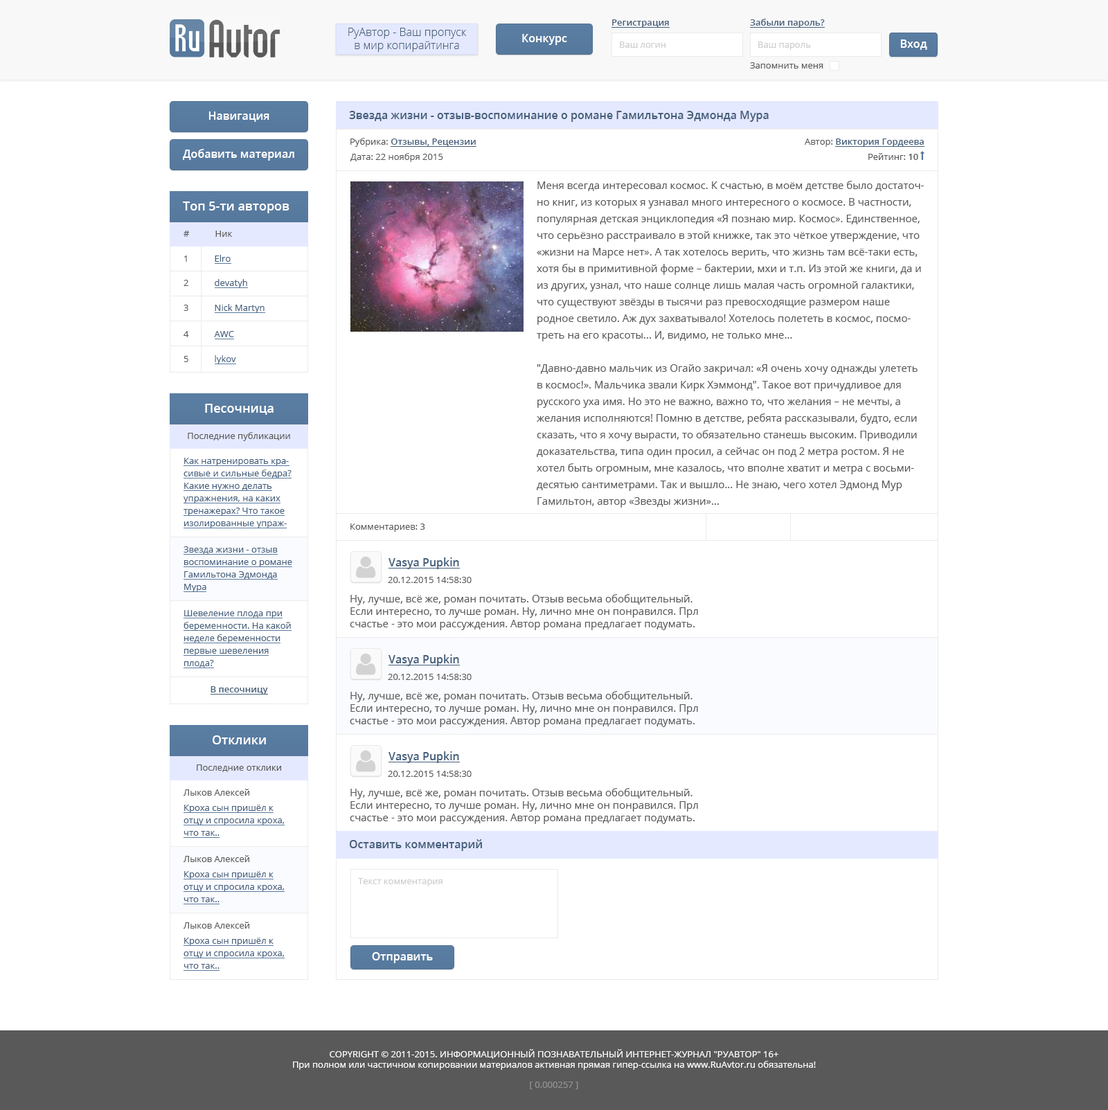
<style>
.page{position:relative;width:1108px;height:1110px;background:#ffffff}
.page>*{position:absolute;margin:0}
.t1{font:11.1px "OpenSans-Light";color:#455f7c}
.t2{font:9px "OpenSans-Semibold";color:#455f7c}
.t3{font:11.1px "OpenSans-Semibold";color:#ffffff}
.t4{font:9px "OpenSans";color:#cccccc}
.t5{font:9px "OpenSans";color:#595959}
.t6{font:11.1px "OpenSans-Semibold";color:#455f7c}
.t7{font:9px "OpenSans-Semibold";color:#595959}
.t8{font:10.4px/16.6px "OpenSans";color:#595959}
.t9{font:12.5px "OpenSans-Semibold";color:#ffffff}
.t10{font:9px "OpenSans";color:#455f7c}
.t11{font:9px/12.5px "OpenSans";color:#455f7c}
.t12{font:10.4px "OpenSans";color:#595959}
.t13{font:9px "OpenSans";color:#ffffff}
.t14{font:9px "OpenSans";color:#929292}
</style>
<div class="page">
<p class="t1" style="left:348px;top:28px;width:119px;height:24px;text-align:center">РуАвтор - Ваш пропуск<br>в мир копирайтинга</p>
<p class="t2" style="left:612px;top:19px;width:57px;height:9px">Регистрация</p>
<p class="t2" style="left:750px;top:19px;width:75px;height:9px">Забыли пароль?</p>
<p class="t3" style="left:522px;top:34px;width:45px;height:11px">Конкурс</p>
<p class="t4" style="left:620px;top:42px;width:45px;height:6px">Ваш логин</p>
<p class="t4" style="left:758px;top:42px;width:53px;height:8px">Ваш пароль</p>
<p class="t3" style="left:900px;top:39px;width:27px;height:11px">Вход</p>
<p class="t5" style="left:750px;top:62px;width:73px;height:7px">Запомнить меня</p>
<p class="t3" style="left:208px;top:111px;width:61px;height:11px">Навигация</p>
<p class="t6" style="left:349px;top:111px;width:419px;height:11px">Звезда жизни - отзыв-воспоминание о романе Гамильтона Эдмонда Мура</p>
<p class="t2" style="left:350px;top:138px;width:126px;height:9px"><span class="t5">Рубрика: </span>Отзывы, Рецензии</p>
<p class="t3" style="left:183px;top:149px;width:111px;height:12px">Добавить материал</p>
<p class="t2" style="left:804px;top:138px;width:120px;height:9px"><span class="t5">Автор: </span>Виктория Гордеева</p>
<p class="t5" style="left:350px;top:153px;width:93px;height:9px">Дата: 22 ноября 2015</p>
<p class="t5" style="left:868px;top:153px;width:50px;height:7px">Рейтинг: <span class="t7">10</span></p>
<p class="t8" style="left:537px;top:181px;width:387px;height:326px">Меня всегда интересовал космос. К счастью, в моём детстве было достаточно книг, из которых я узнавал много интересного о космосе. В частности, популярная детская энциклопедия «Я познаю мир. Космос». Единственное, что серьёзно расстраивало в этой книжке, так это чёткое утверждение, что «жизни на Марсе нет». А так хотелось верить, что жизнь там всё-таки есть, хотя бы в примитивной форме – бактерии, мхи и т.п. Из этой же книги, да и из других, узнал, что наше солнце лишь малая часть огромной галактики, что существуют звёзды в тысячи раз превосходящие размером наше родное светило. Аж дух захватывало! Хотелось полететь в космос, посмотреть на его красоты… И, видимо, не только мне…<br><br>"Давно-давно мальчик из Огайо закричал: «Я очень хочу однажды улететь в космос!». Мальчика звали Кирк Хэммонд". Такое вот причудливое для русского уха имя. Но это не важно, важно то, что желания – не мечты, а желания исполняются! Помню в детстве, ребята рассказывали, будто, если сказать, что я хочу вырасти, то обязательно станешь высоким. Приводили доказательства, типа один просил, а сейчас он под 2 метра ростом. Я не хотел быть огромным, мне казалось, что вполне хватит и метра с восьмидесятью сантиметрами. Так и вышло... Не знаю, чего хотел Эдмонд Мур Гамильтон, автор «Звезды жизни»...<br>но помимо космосакосмос, человек и время или красоту, любовь и вечность. А Кирк Хэммонд – герой, созданный этим автором. И лично мне он напоминает Германа Титова, космонавта №2 от России-СССР. Почему Титова? Гагарин был очень улыбчивым, достаточно ярким, а Титов наоборот – несколько хмурым, серьёзным. Но героизма в его полётах было ничуть не меньше, чем у Юрия Гагарина.<br><br>Кирк Хэммонд был не первым в истории ч</p>
<p class="t9" style="left:183px;top:201px;width:106px;height:12px">Топ 5-ти авторов</p>
<p class="t5" style="left:183px;top:231px;width:50px;height:6px">#           Ник</p>
<p class="t10" style="left:184px;top:255px;width:47px;height:7px"><span class="t5">1           </span>Elro</p>
<p class="t10" style="left:183px;top:279px;width:64px;height:9px"><span class="t5">2           </span>devatyh</p>
<p class="t10" style="left:183px;top:304px;width:81px;height:9px"><span class="t5">3           </span>Nick Martyn</p>
<p class="t10" style="left:183px;top:331px;width:51px;height:6px"><span class="t5">4           </span>AWC</p>
<p class="t10" style="left:183px;top:355px;width:53px;height:9px"><span class="t5">5           </span>lykov</p>
<p class="t9" style="left:205px;top:404px;width:68px;height:11px">Песочница</p>
<p class="t5" style="left:188px;top:432px;width:102px;height:9px">Последние публикации</p>
<p class="t11" style="left:183px;top:458px;width:108px;height:70px">Как натренировать красивые и сильные бедра? Какие нужно делать упражнения, на каких тренажерах? Что такое изолированные упражнения и для чего они нужны?</p>
<p class="t5" style="left:350px;top:523px;width:75px;height:9px">Комментариев: <span class="t7">3</span></p>
<p class="t11" style="left:183px;top:546px;width:109px;height:46px">Звезда жизни - отзыв воспоминание о романе Гамильтона Эдмонда Мура</p>
<p class="t6" style="left:388px;top:557px;width:71px;height:12px">Vasya Pupkin</p>
<p class="t5" style="left:388px;top:577px;width:83px;height:6px">20.12.2015 14:58:30</p>
<p class="t12" style="left:350px;top:594px;width:348px;height:36px">Ну, лучше, всё же, роман почитать. Отзыв весьма обобщительный. Если интересно, то лучше роман. Ну, лично мне он понравился. Прл счастье - это мои рассуждения. Автор романа предлагает подумать. Сюжет там интересный, по-моему,</p>
<p class="t11" style="left:183px;top:610px;width:108px;height:57px">Шевеление плода при беременности. На какой неделе беременности первые шевеления плода?</p>
<p class="t6" style="left:388px;top:654px;width:71px;height:12px">Vasya Pupkin</p>
<p class="t5" style="left:388px;top:674px;width:83px;height:6px">20.12.2015 14:58:30</p>
<p class="t2" style="left:210px;top:686px;width:58px;height:8px">В песочницу</p>
<p class="t12" style="left:350px;top:691px;width:348px;height:36px">Ну, лучше, всё же, роман почитать. Отзыв весьма обобщительный. Если интересно, то лучше роман. Ну, лично мне он понравился. Прл счастье - это мои рассуждения. Автор романа предлагает подумать. Сюжет там интересный, по-моему,</p>
<p class="t9" style="left:213px;top:735px;width:53px;height:9px">Отклики</p>
<p class="t6" style="left:388px;top:751px;width:71px;height:12px">Vasya Pupkin</p>
<p class="t5" style="left:197px;top:764px;width:84px;height:8px">Последние отклики</p>
<p class="t5" style="left:388px;top:771px;width:83px;height:6px">20.12.2015 14:58:30</p>
<p class="t5" style="left:183px;top:789px;width:66px;height:6px">Лыков Алексей</p>
<p class="t12" style="left:350px;top:788px;width:348px;height:36px">Ну, лучше, всё же, роман почитать. Отзыв весьма обобщительный. Если интересно, то лучше роман. Ну, лично мне он понравился. Прл счастье - это мои рассуждения. Автор романа предлагает подумать. Сюжет там интересный, по-моему,</p>
<p class="t11" style="left:183px;top:804px;width:102px;height:32px">Кроха сын пришёл к отцу и спросила кроха, что так..</p>
<p class="t6" style="left:349px;top:839px;width:133px;height:12px">Оставить комментарий</p>
<p class="t5" style="left:183px;top:855px;width:66px;height:7px">Лыков Алексей</p>
<p class="t11" style="left:183px;top:871px;width:102px;height:31px">Кроха сын пришёл к отцу и спросила кроха, что так..</p>
<p class="t4" style="left:358px;top:878px;width:84px;height:8px">Текст комментария</p>
<p class="t5" style="left:183px;top:921px;width:66px;height:7px">Лыков Алексей</p>
<p class="t11" style="left:183px;top:937px;width:102px;height:32px">Кроха сын пришёл к отцу и спросила кроха, что так..</p>
<p class="t3" style="left:372px;top:952px;width:61px;height:11px">Отправить</p>
<p class="t13" style="left:293px;top:1049px;width:523px;height:21px;text-align:center">COPYRIGHT © 2011-2015. ИНФОРМАЦИОННЫЙ ПОЗНАВАТЕЛЬНЫЙ ИНТЕРНЕТ-ЖУРНАЛ "РУАВТОР" 16+<br>При полном или частичном копировании материалов активная прямая гипер-ссылка на www.RuAvtor.ru обязательна!</p>
<p class="t14" style="left:530px;top:1081px;width:48px;height:8px">[ 0.000257 ]</p>
</div>
